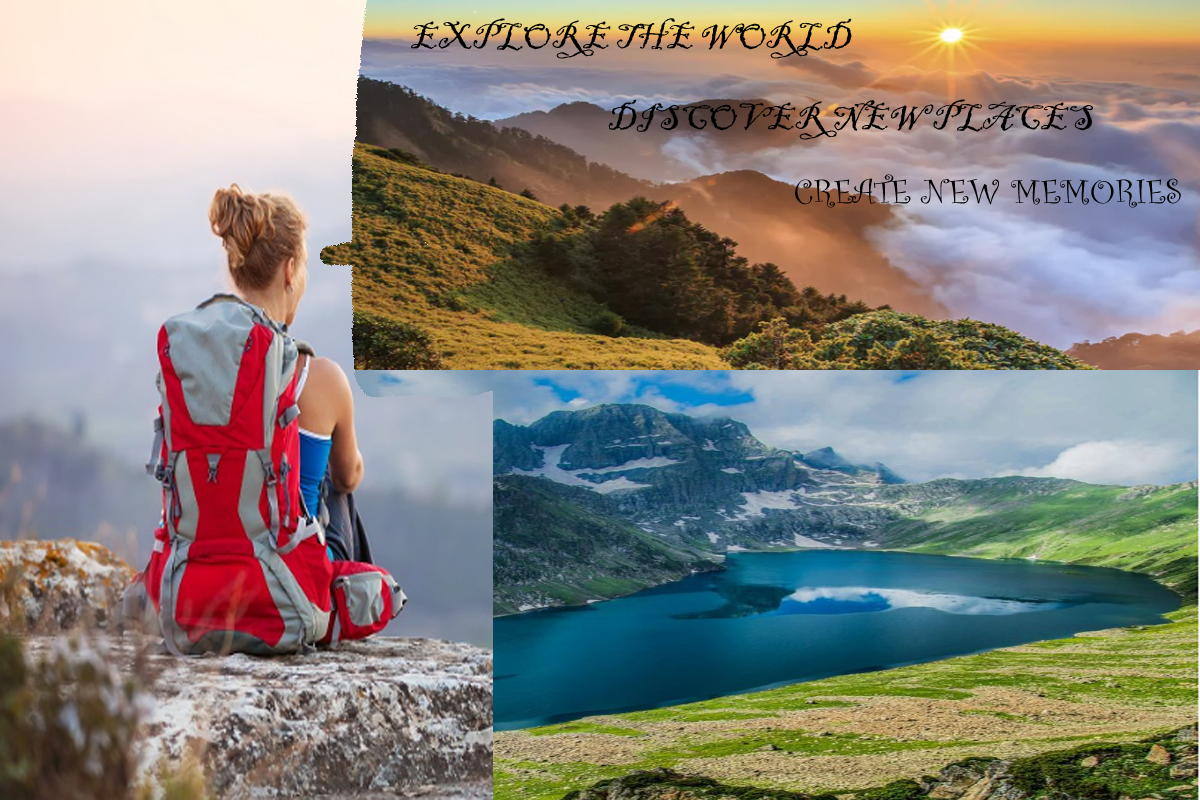
<style>
.page{position:relative;width:1200px;height:800px}
.page>*{position:absolute;margin:0}
.t1{font:36px "BlackadderITC-Regular";color:#000000}
.t2{font:36px "CurlzMT";color:#000000}
</style>
<div class="page">
<p class="t1" style="left:411px;top:18px;width:441px;height:41px">EXPLORE THE WORLD</p>
<p class="t1" style="left:608px;top:99px;width:485px;height:41px">DISCOVER NEW PLACES</p>
<p class="t2" style="left:795px;top:174px;width:386px;height:34px">CREATE NEW MEMORIES</p>
</div>
